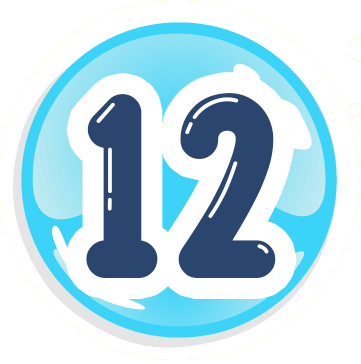
<style>
.page{position:relative;width:361px;height:364px;background:#ffffff}
.page>*{position:absolute;margin:0}
.t1{font:262.5px "BubbleBobble";color:#2a456e}
</style>
<div class="page">
<p class="t1" style="left:86px;top:93px;width:190px;height:185px">12</p>
</div>
